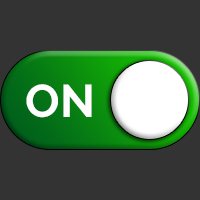
<style>
.page{position:relative;width:200px;height:200px;background:#333333}
.page>*{position:absolute;margin:0}
.t1{font:45.8px "Raleway-Bold";color:#fefefe;text-transform:uppercase}
</style>
<div class="page">
<p class="t1" style="left:26px;top:84px;width:66px;height:34px">On</p>
</div>
